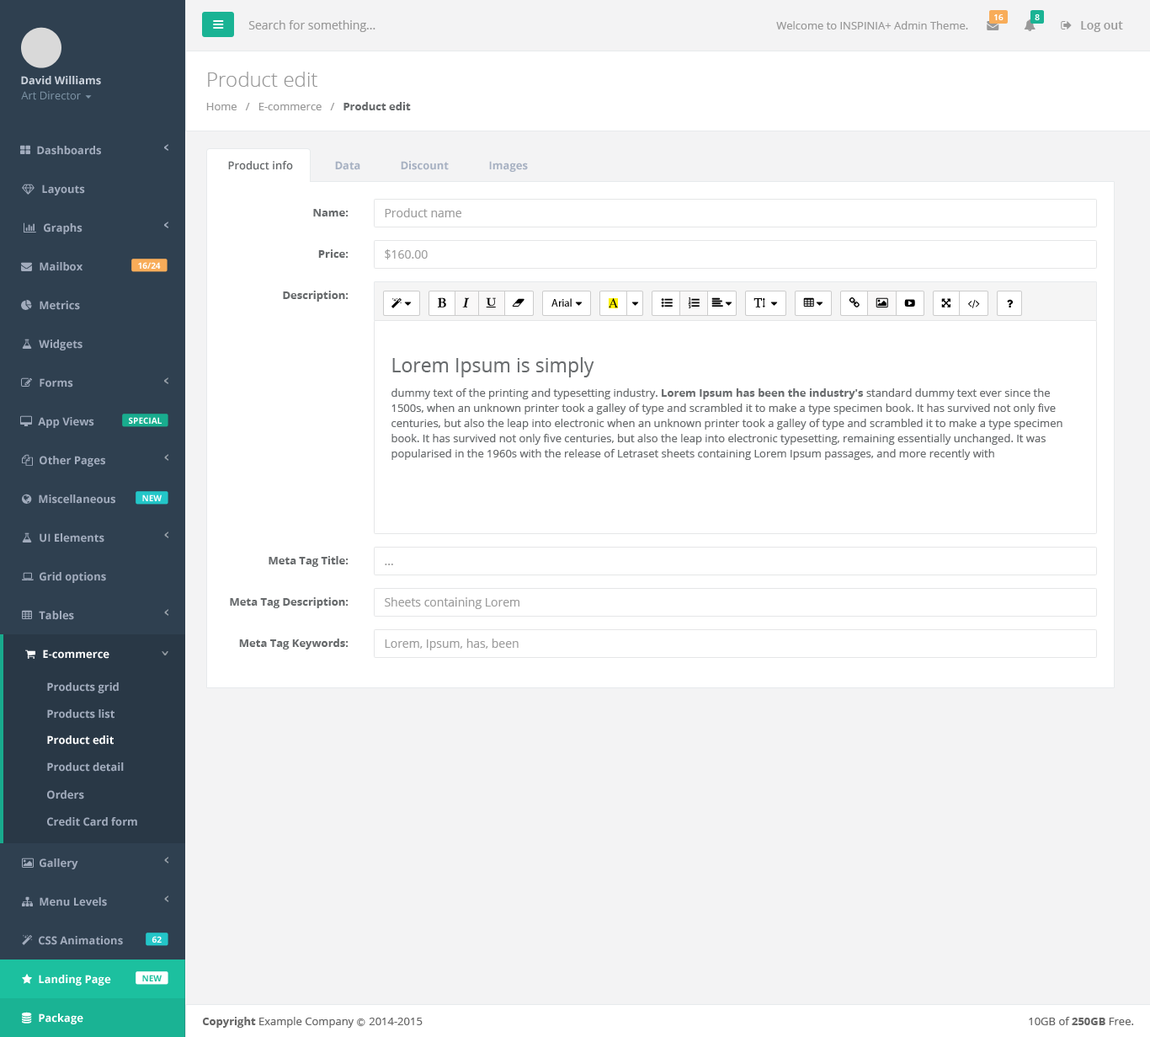
<style>
.page{position:relative;width:1150px;height:1037px;background:#ffffff}
.page>*{position:absolute;margin:0}
.t1{font:8.4px "OpenSans-Semibold";color:#ffffff}
.t2{font:11.8px "OpenSans";color:#999999}
.t3{font:10.9px "OpenSans";color:#999999}
.t4{font:11.8px "OpenSans-Semibold";color:#999999}
.t5{font:10.9px "OpenSans-Bold";color:#cad1db}
.t6{font:20.2px "OpenSans-Light";color:#999999}
.t7{font:10.9px "OpenSans";color:#7d93a5}
.t8{font:10.9px "OpenSans-Bold";color:#676a6c}
.t9{font:10.9px "OpenSans-Bold";color:#a2acbd}
.t10{font:10.9px "OpenSans-Semibold";color:#676a6c}
.t11{font:10.9px "OpenSans-Bold";color:#a7b1c2}
.t12{font:11.8px "OpenSans";color:#9e9e9e}
.t13{font:8.4px "OpenSans-Bold";color:#fefefe}
.t14{font:10.9px "MyriadPro-Regular";color:#000000}
.t15{font:13.5px "TimesNewRomanPSMT";color:#000000}
.t16{font:19.4px "OpenSans";color:#696c6e}
.t17{font:10.9px/15.2px "OpenSans";color:#696c6e}
.t18{font:10.9px/15.2px "OpenSans-Bold";color:#696c6e}
.t19{font:10.9px "OpenSans-Bold";color:#ffffff}
.t20{font:8.4px "OpenSans-Bold";color:#1cc09f}
.t21{font:10.9px "OpenSans";color:#666666}
.t22{font:10.9px "OpenSans-Bold";color:#666666}
.t23{font:8.4px "Meiryo";color:#666666}
</style>
<div class="page">
<p class="t1" style="left:995px;top:14px;width:9px;height:6px">16</p>
<p class="t1" style="left:1035px;top:14px;width:5px;height:6px">8</p>
<p class="t2" style="left:248px;top:20px;width:128px;height:12px">Search for something...</p>
<p class="t3" style="left:776px;top:21px;width:192px;height:8px">Welcome to INSPINIA+ Admin Theme.</p>
<p class="t4" style="left:1081px;top:21px;width:42px;height:11px">Log out</p>
<p class="t5" style="left:21px;top:76px;width:80px;height:9px">David Williams</p>
<p class="t6" style="left:208px;top:72px;width:109px;height:15px">Product edit</p>
<p class="t7" style="left:21px;top:91px;width:60px;height:9px">Art Director</p>
<p class="t3" style="left:206px;top:102px;width:205px;height:8px">Home   /   E-commerce   /   <span class="t8">Product edit</span></p>
<p class="t9" style="left:37px;top:146px;width:64px;height:9px">Dashboards</p>
<p class="t10" style="left:228px;top:161px;width:65px;height:9px">Product info</p>
<p class="t11" style="left:335px;top:161px;width:25px;height:9px">Data</p>
<p class="t11" style="left:401px;top:161px;width:48px;height:9px">Discount</p>
<p class="t11" style="left:489px;top:161px;width:39px;height:11px">Images</p>
<p class="t9" style="left:42px;top:184px;width:43px;height:11px">Layouts</p>
<p class="t8" style="left:313px;top:209px;width:36px;height:7px">Name:</p>
<p class="t12" style="left:385px;top:208px;width:76px;height:9px">Product name</p>
<p class="t9" style="left:44px;top:223px;width:39px;height:11px">Graphs</p>
<p class="t8" style="left:318px;top:249px;width:31px;height:9px">Price:</p>
<p class="t12" style="left:385px;top:249px;width:43px;height:10px">$160.00</p>
<p class="t9" style="left:40px;top:262px;width:43px;height:9px">Mailbox</p>
<p class="t13" style="left:138px;top:262px;width:23px;height:7px">16/24</p>
<p class="t8" style="left:283px;top:291px;width:66px;height:10px">Description:</p>
<p class="t9" style="left:40px;top:301px;width:40px;height:9px">Metrics</p>
<p class="t14" style="left:552px;top:298px;width:20px;height:9px">Arial</p>
<p class="t15" style="left:609px;top:298px;width:9px;height:9px">A</p>
<p class="t9" style="left:39px;top:339px;width:44px;height:11px">Widgets</p>
<p class="t16" style="left:392px;top:357px;width:203px;height:20px">Lorem Ipsum is simply</p>
<p class="t9" style="left:40px;top:378px;width:33px;height:9px">Forms</p>
<p class="t17" style="left:392px;top:388px;width:671px;height:72px">dummy text of the printing and typesetting industry. <span class="t18">Lorem Ipsum has been the industry's</span> standard dummy text ever since the 1500s, when an unknown printer took a galley of type and scrambled it to make a type specimen book. It has survived not only five centuries, but also the leap into electronic when an unknown printer took a galley of type and scrambled it to make a type specimen book. It has survived not only five centuries, but also the leap into electronic typesetting, remaining essentially unchanged. It was popularised in the 1960s with the release of Letraset sheets containing Lorem Ipsum passages, and more recently with</p>
<p class="t9" style="left:38px;top:417px;width:56px;height:11px">App Views</p>
<p class="t13" style="left:129px;top:417px;width:33px;height:7px">SPECIAL</p>
<p class="t9" style="left:40px;top:456px;width:65px;height:11px">Other Pages</p>
<p class="t9" style="left:39px;top:494px;width:76px;height:10px">Miscellaneous</p>
<p class="t13" style="left:142px;top:494px;width:20px;height:7px">NEW</p>
<p class="t9" style="left:40px;top:533px;width:64px;height:9px">UI Elements</p>
<p class="t8" style="left:269px;top:556px;width:80px;height:11px">Meta Tag Title:</p>
<p class="t12" style="left:385px;top:563px;width:8px;height:2px">...</p>
<p class="t9" style="left:40px;top:572px;width:66px;height:11px">Grid options</p>
<p class="t8" style="left:230px;top:597px;width:119px;height:11px">Meta Tag Description:</p>
<p class="t12" style="left:385px;top:597px;width:135px;height:12px">Sheets containing Lorem</p>
<p class="t9" style="left:39px;top:611px;width:35px;height:9px">Tables</p>
<p class="t8" style="left:239px;top:638px;width:110px;height:11px">Meta Tag Keywords:</p>
<p class="t12" style="left:385px;top:638px;width:134px;height:12px">Lorem, Ipsum, has, been</p>
<p class="t19" style="left:43px;top:649px;width:66px;height:10px">E-commerce</p>
<p class="t9" style="left:47px;top:682px;width:72px;height:11px">Products grid</p>
<p class="t9" style="left:47px;top:709px;width:68px;height:9px">Products list</p>
<p class="t19" style="left:47px;top:735px;width:67px;height:9px">Product edit</p>
<p class="t9" style="left:47px;top:762px;width:77px;height:9px">Product detail</p>
<p class="t9" style="left:47px;top:790px;width:37px;height:9px">Orders</p>
<p class="t9" style="left:47px;top:817px;width:90px;height:9px">Credit Card form</p>
<p class="t9" style="left:40px;top:858px;width:38px;height:11px">Gallery</p>
<p class="t9" style="left:40px;top:897px;width:67px;height:9px">Menu Levels</p>
<p class="t9" style="left:39px;top:936px;width:84px;height:9px">CSS Animations</p>
<p class="t13" style="left:152px;top:936px;width:10px;height:6px">62</p>
<p class="t19" style="left:39px;top:974px;width:72px;height:11px">Landing Page</p>
<p class="t20" style="left:142px;top:974px;width:20px;height:7px">NEW</p>
<p class="t19" style="left:39px;top:1013px;width:44px;height:11px">Package</p>
<p class="t21" style="left:202px;top:1016px;width:221px;height:11px"><span class="t22">Copyright</span> Example Company <span class="t23">Ⓒ </span>2014-2015</p>
<p class="t21" style="left:1029px;top:1016px;width:105px;height:9px">10GB of <span class="t22">250GB</span> Free.</p>
</div>
